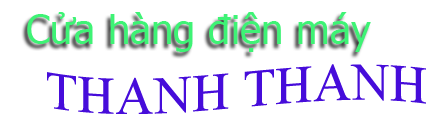
<style>
.page{position:relative;width:447px;height:131px;background:#ffffff}
.page>*{position:absolute;margin:0}
.t1{font:40px "Tahoma";color:#3ef375}
.t2{font:53px "TimesNewRomanPSMT";color:#460cda}
</style>
<div class="page">
<p class="t1" style="left:27px;top:12px;width:344px;height:40px">Cửa hàng điện máy</p>
<p class="t2" style="left:47px;top:64px;width:379px;height:50px">THANH THANH</p>
</div>
